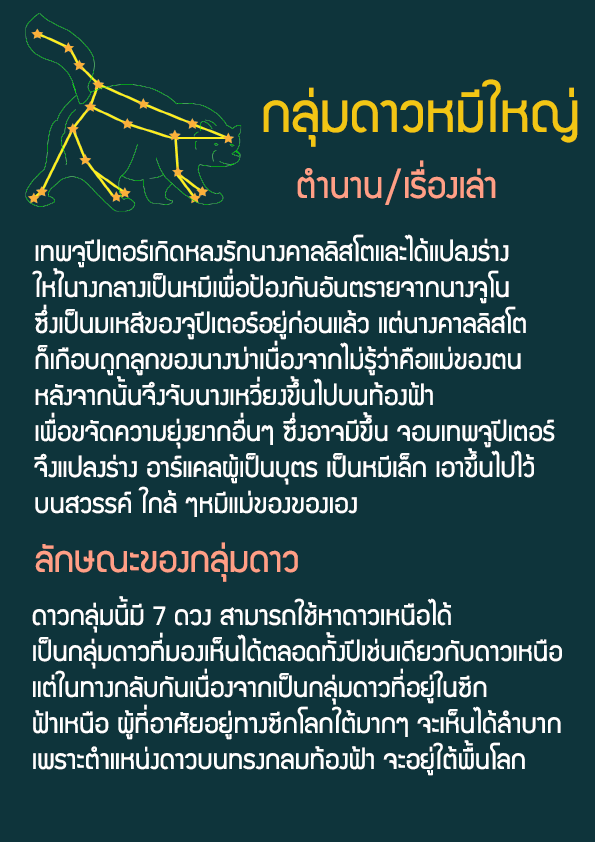
<style>
.page{position:relative;width:595px;height:842px;background:#0e343b}
.page>*{position:absolute;margin:0}
.t1{font:60px "supermarket";color:#f2c614}
.t2{font:40px "supermarket";color:#ff9f86}
.t3{font:30px "supermarket";color:#ffffff}
</style>
<div class="page">
<p class="t1" style="left:263px;top:79px;width:315px;height:68px">กลุ่มดาวหมีใหญ่</p>
<p class="t2" style="left:297px;top:160px;width:199px;height:45px">ตำนาน/เรื่องเล่า</p>
<p class="t3" style="left:32px;top:234px;width:523px;height:283px">เทพจูปีเตอร์เกิดหลงรักนางคาลลิสโตและได้แปลงร่าง<br>ใหใ้นางกลางเป็นหมีเพื่อป้องกันอันตรายจากนางจูโน<br>ซึ่งเป็นมเหสีของจูปีเตอร์อยู่ก่อนแล้ว แต่นางคาลลิสโต<br>ก็เกือบถูกลูกของนางฆ่าเนื่องจากไม่รู้ว่าคือแม่ของตน <br>หลังจากนั้นจึงจับนางเหวี่ยงขึ้นไปบนท้องฟ้า <br>เพื่อขจัดความยุ่งยากอื่นๆ ซึ่งอาจมีขึ้น จอมเทพจูปีเตอร์<br>จึงแปลงร่าง อาร์แคลผู้เป็นบุตร เป็นหมีเล็ก เอาขึ้นไปไว้<br>บนสวรรค์ ใกล้ ๆหมีแม่ของของเอง</p>
<p class="t2" style="left:35px;top:542px;width:263px;height:40px">ลักษณะของกลุ่มดาว</p>
<p class="t3" style="left:32px;top:596px;width:530px;height:180px">ดาวกลุ่มนี้มี 7 ดวง สามารถใช้หาดาวเหนือได้ <br>เป็นกลุ่มดาวที่ี่มองเห็นได้ตลอดทั้งปีเช่นเดียวกับดาวเหนือ<br>แต่ในทางกลับกันเนื่องจากเป็นกลุ่มดาวที่อยู่ในซีก<br>ฟ้าเหนือ ผู้ที่อาศัยอยู่ทางซีกโลกใต้มากๆ จะเห็นได้ลำบาก <br>เพราะตำแหน่งดาวบนทรงกลมท้องฟ้า จะอยู่ใต้พื้นโลก</p>
</div>
